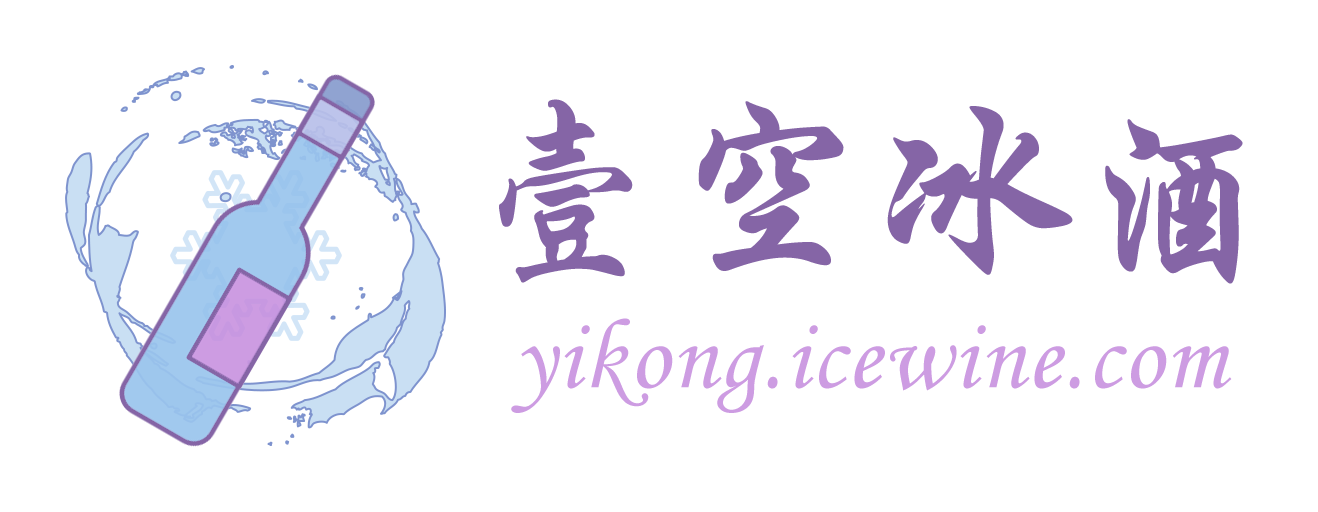
<style>
.page{position:relative;width:1318px;height:512px;background:#ffffff}
.page>*{position:absolute;margin:0}
.t1{font:200px "STXingkai";letter-spacing:0.02em;color:#8565a6}
.t2{font:100px "MonotypeCorsiva";letter-spacing:0.02em;color:#cd9ce2}
</style>
<div class="page">
<p class="t1" style="left:499px;top:99px;width:744px;height:185px">壹空冰酒</p>
<p class="t2" style="left:511px;top:318px;width:721px;height:95px">yikong.icewine.com</p>
</div>
